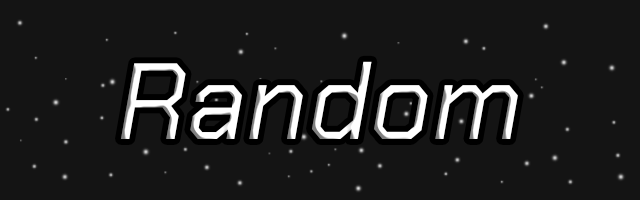
<style>
.page{position:relative;width:640px;height:200px;background:#141414}
.page>*{position:absolute;margin:0}
.t1{font:108px "ChakraPetch-Italic";color:#ffffff}
</style>
<div class="page">
<p class="t1" style="left:121px;top:61px;width:397px;height:78px">Random</p>
</div>
